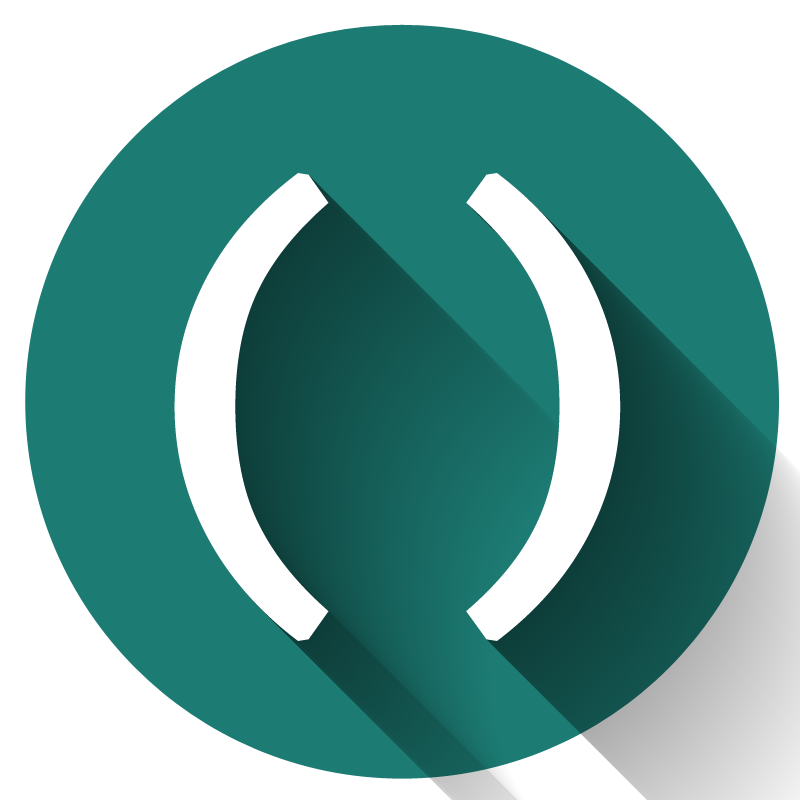
<style>
.page{position:relative;width:800px;height:800px;background:#1c7b73}
.page>*{position:absolute;margin:0}
.t1{font:540px "AndaleMono";color:#ffffff;font-weight:bold}
</style>
<div class="page">
<p class="t1" style="left:174px;top:173px;width:447px;height:468px">()</p>
</div>
